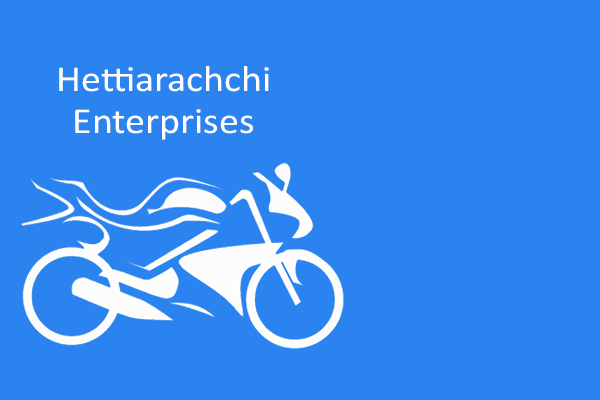
<style>
.page{position:relative;width:600px;height:400px;background:#2b83ef}
.page>*{position:absolute;margin:0}
.t1{font:36.8px "Calibri";color:#ffffff;scale:1.09 1}
</style>
<div class="page">
<p class="t1" style="left:59px;top:66px;width:210px;height:26px">Hettiarachchi</p>
<p class="t1" style="left:75px;top:109px;width:178px;height:31px">Enterprises</p>
</div>
